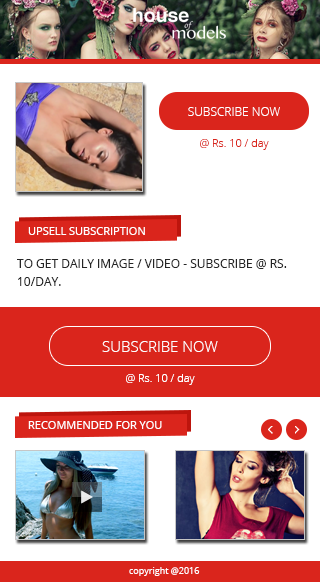
<style>
.page{position:relative;width:320px;height:582px;background:#ffffff}
.page>*{position:absolute;margin:0}
.t1{font:12px "OpenSans-Light";color:#fffefe}
.t2{font:11px "OpenSans-Light";color:#da251c}
.t3{font:11px "OpenSans";color:#fffefe}
.t4{font:12px/18px "OpenSans";color:#252525;text-transform:uppercase}
.t5{font:15px "OpenSans-Light";color:#fffefe}
.t6{font:11px "OpenSans-Light";color:#fffefe}
.t7{font:11px "OpenSans";color:#ffffff}
.t8{font:9px "OpenSans";color:#fefefe}
</style>
<div class="page">
<p class="t1" style="left:188px;top:107px;width:92px;height:9px">SUBSCRIBE NOW</p>
<p class="t2" style="left:200px;top:139px;width:69px;height:11px">@ Rs. 10 / day</p>
<p class="t3" style="left:28px;top:227px;width:117px;height:8px">UPSELL SUBSCRIPTION</p>
<p class="t4" style="left:17px;top:259px;width:270px;height:27px">To Get Daily Image / Video - SUBSCRIBE @ Rs. 10/Day.</p>
<p class="t5" style="left:102px;top:341px;width:116px;height:11px">SUBSCRIBE NOW</p>
<p class="t6" style="left:126px;top:374px;width:69px;height:11px">@ Rs. 10 / day</p>
<p class="t7" style="left:28px;top:421px;width:134px;height:8px">RECOMMENDED FOR YOU</p>
<p class="t8" style="left:129px;top:567px;width:71px;height:9px">copyright @2016</p>
</div>
